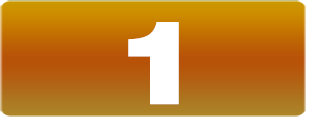
<style>
.page{position:relative;width:309px;height:117px}
.page>*{position:absolute;margin:0}
.t1{font:117.1px "Swiss721BT-Black";color:#ffffff;scale:1.18 1}
</style>
<div class="page">
<p class="t1" style="left:128px;top:22px;width:51px;height:83px">1</p>
</div>
